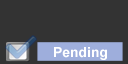
<style>
.page{position:relative;width:128px;height:64px;background:#333333}
.page>*{position:absolute;margin:0}
.t1{font:13.9px "Arial-BoldMT";color:#ffffff}
</style>
<div class="page">
<p class="t1" style="left:54px;top:47px;width:53px;height:13px">Pending</p>
</div>
